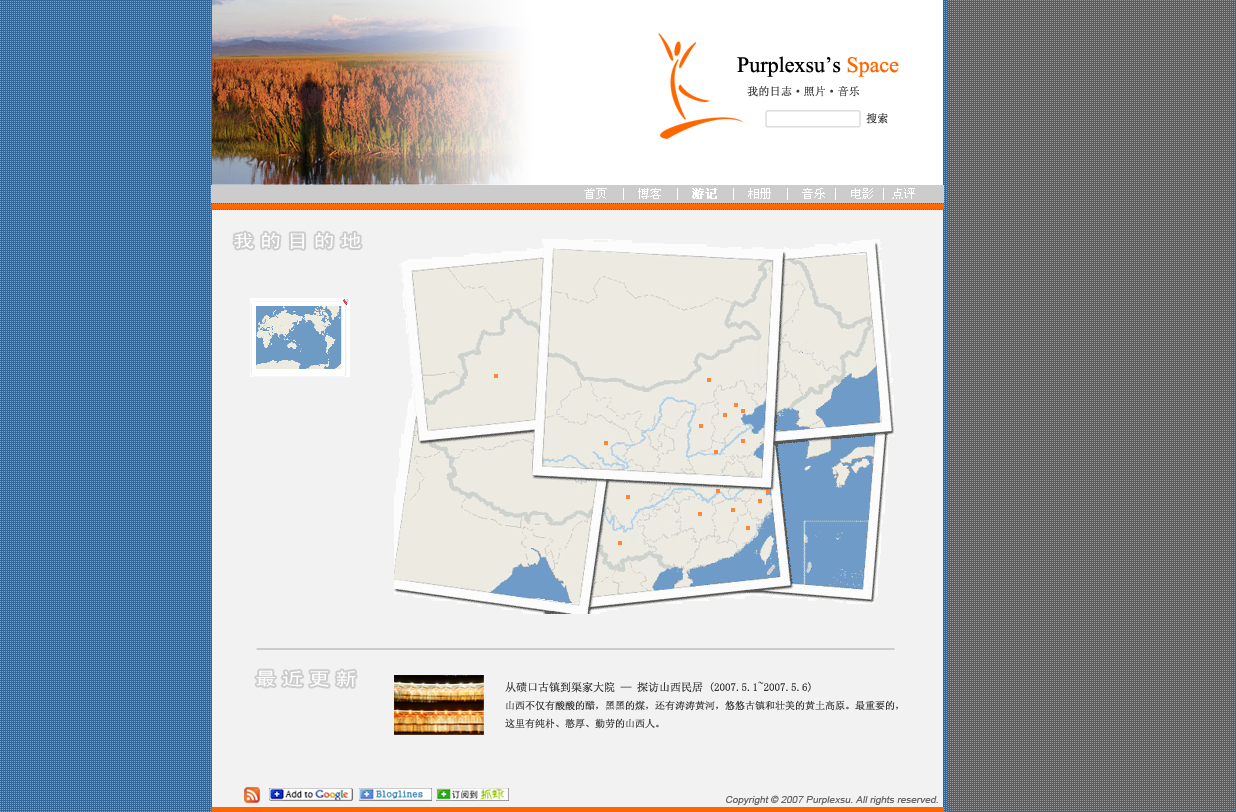
<style>
.page{position:relative;width:1236px;height:812px;background:#336699}
.page>*{position:absolute;margin:0}
.t1{font:22px "TimesNewRomanPSMT";color:#000000}
.t2{font:22px "TimesNewRomanPSMT";color:#ff6600}
.t3{font:11px "SimSun";color:#333333;font-weight:bold}
.t4{font:12px "SimSun";color:#ffffff}
.t5{font:12px "SimSun";color:#ffffff;font-weight:bold}
.t6{font:18px "SimHei";letter-spacing:0.24em;color:#ffffff;scale:1.2 1}
.t7{font:10px/18px "SimSun";color:#333333}
.t8{font:11px/18px "SimSun";color:#333333}
.t9{font:10px "ArialMT";color:#666666;font-style:italic}
</style>
<div class="page">
<p class="t1" style="left:737px;top:56px;width:162px;height:21px">Purplexsu’s <span class="t2">Space</span></p>
<p class="t3" style="left:747px;top:86px;width:112px;height:11px">我的日志·照片·音乐</p>
<p class="t3" style="left:866px;top:113px;width:22px;height:11px">搜索</p>
<p class="t4" style="left:584px;top:188px;width:331px;height:12px">首页  |  博客  |  <span class="t5">游记</span>  |  相册  |  音乐 |  电影 | 点评</p>
<p class="t6" style="left:234px;top:232px;width:127px;height:17px">我的目的地</p>
<p class="t6" style="left:256px;top:670px;width:100px;height:17px">最近更新</p>
<p class="t7" style="left:505px;top:681px;width:393px;height:48px"><span class="t8">从碛口古镇到渠家大院 — 探访山西民居 (2007.5.1~2007.5.6)<br></span>山西不仅有酸酸的醋，黑黑的煤，还有涛涛黄河，悠悠古镇和壮美的黄土高原。最重要的，<br>这里有纯朴、憨厚、勤劳的山西人。</p>
<p class="t9" style="left:726px;top:795px;width:212px;height:10px">Copyright © 2007 Purplexsu. All rights reserved.</p>
</div>
